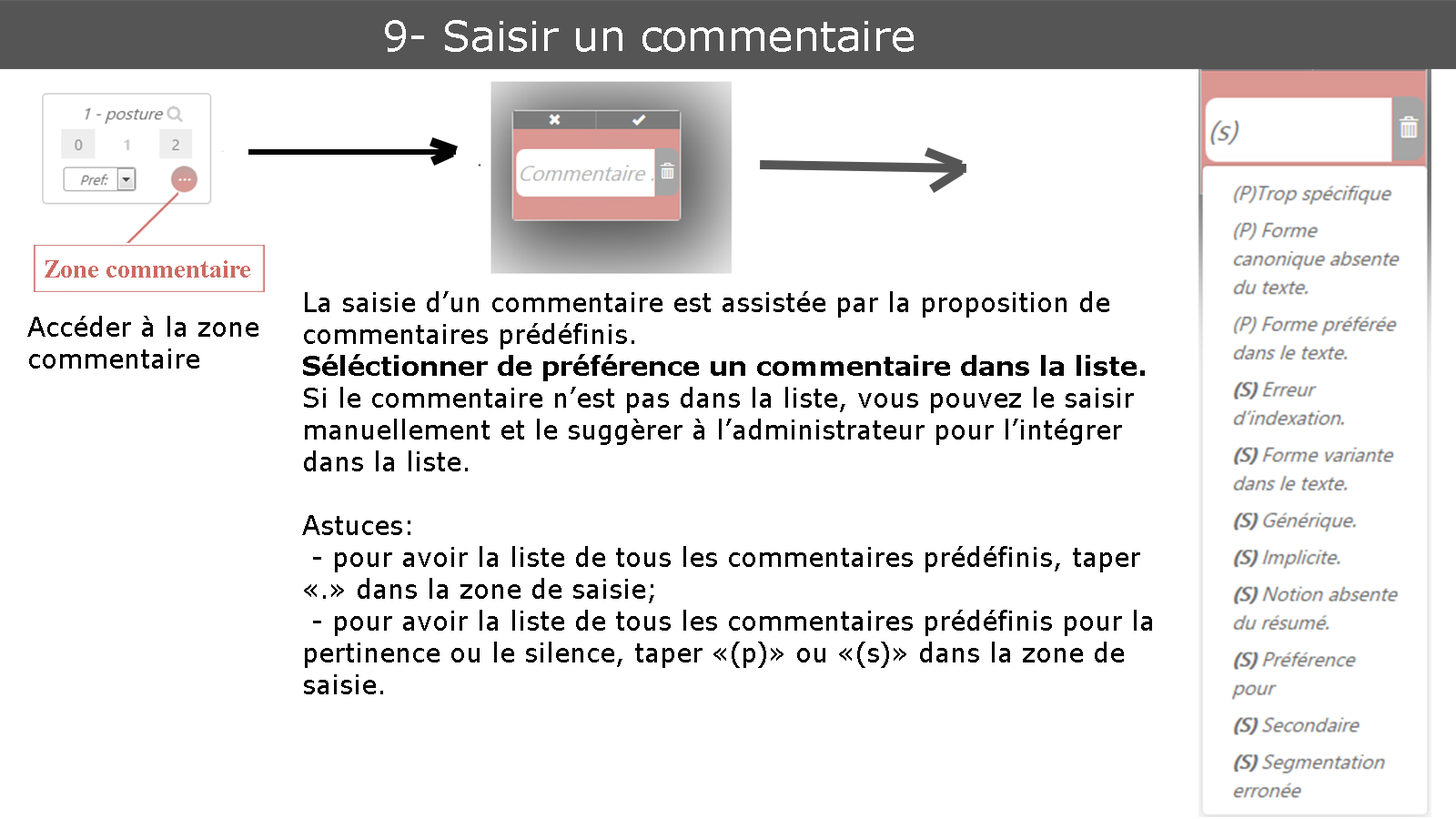
<style>
.page{position:relative;width:1456px;height:819px;background:#ffffff}
.page>*{position:absolute;margin:0}
.t1{font:41.7px "Verdana";color:#ffffff}
.t2{font:26.5px "TimesNewRomanPS-BoldMT";color:#cc6a63}
.t3{font:26.5px "Verdana";color:#000000}
.t4{font:26.5px "Verdana-Bold";color:#000000}
</style>
<div class="page">
<p class="t1" style="left:385px;top:20px;width:529px;height:32px">9- Saisir un commentaire</p>
<p class="t2" style="left:45px;top:260px;width:205px;height:18px">Zone commentaire</p>
<p class="t3" style="left:302px;top:291px;width:850px;height:403px">La saisie d’un commentaire est assistée par la proposition de commentaires prédéfinis.<br><span class="t4">Séléctionner de préférence un commentaire dans la liste.<br></span>Si le commentaire n’est pas dans la liste, vous pouvez le saisir manuellement et le suggèrer à l’administrateur pour l’intégrer dans la liste.<br><br>Astuces:<br> - pour avoir la liste de tous les commentaires prédéfinis, taper «.» dans la zone de saisie;<br> - pour avoir la liste de tous les commentaires prédéfinis pour la pertinence ou le silence, taper «(p)» ou «(s)» dans la zone de saisie.</p>
<p class="t3" style="left:27px;top:316px;width:231px;height:53px">Accéder à la zone commentaire</p>
</div>
